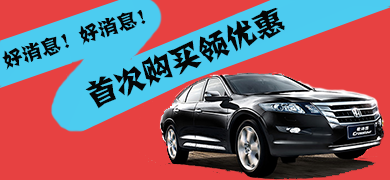
<style>
.page{position:relative;width:390px;height:180px;background:#e74141}
.page>*{position:absolute;margin:0}
.t1{font:20px "FZJZJW--GB1-0";color:#050505}
.t2{font:30px "FZJZJW--GB1-0";color:#050505}
</style>
<div class="page">
<p class="t1" style="left:2px;top:10px;width:144px;height:60px;rotate:-18deg">好消息！好消息！</p>
<p class="t2" style="left:85px;top:7px;width:200px;height:102px;rotate:-22deg">首次购买领优惠</p>
</div>
